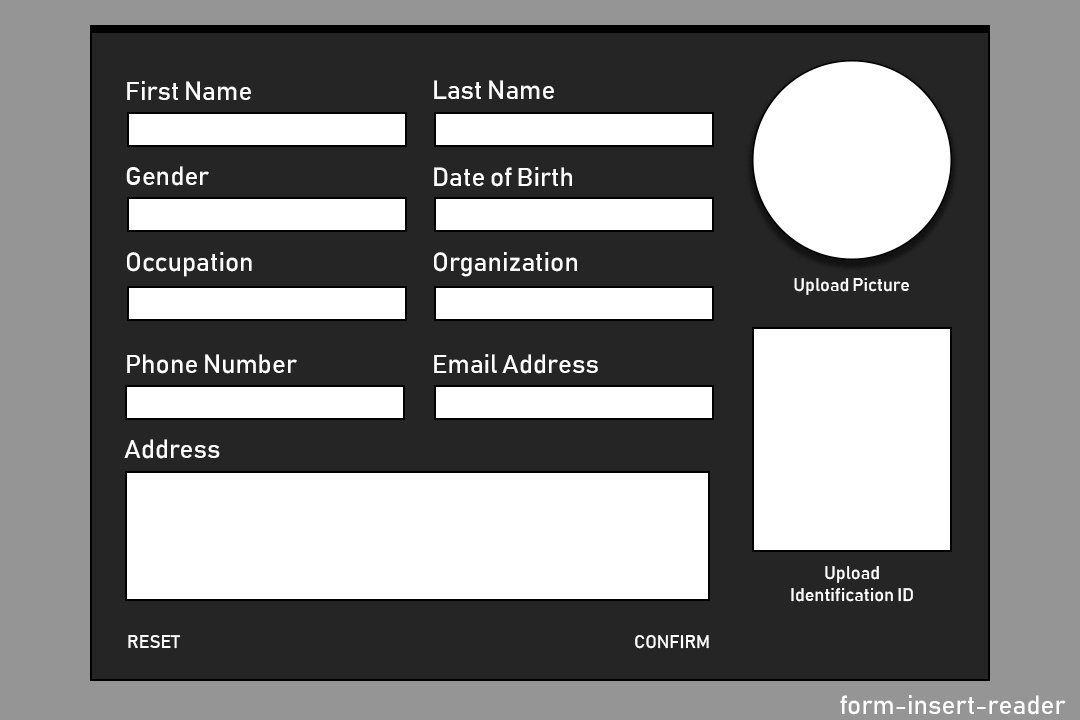
<style>
.page{position:relative;width:1080px;height:720px;background:#252525}
.page>*{position:absolute;margin:0}
.t1{font:26px "Bahnschrift";color:#ffffff}
.t2{font:18px "Bahnschrift";color:#ffffff}
.t3{font:26px "Bahnschrift";color:#fefefe}
</style>
<div class="page">
<p class="t1" style="left:127px;top:81px;width:124px;height:19px">First Name</p>
<p class="t1" style="left:434px;top:80px;width:120px;height:19px">Last Name</p>
<p class="t1" style="left:126px;top:166px;width:83px;height:20px">Gender</p>
<p class="t1" style="left:434px;top:167px;width:138px;height:20px">Date of Birth</p>
<p class="t1" style="left:127px;top:252px;width:125px;height:25px">Occupation</p>
<p class="t1" style="left:434px;top:252px;width:143px;height:25px">Organization</p>
<p class="t2" style="left:794px;top:278px;width:115px;height:17px">Upload Picture</p>
<p class="t1" style="left:127px;top:354px;width:170px;height:20px">Phone Number</p>
<p class="t1" style="left:434px;top:354px;width:164px;height:20px">Email Address</p>
<p class="t1" style="left:124px;top:439px;width:96px;height:20px">Address</p>
<p class="t2" style="left:791px;top:566px;width:122px;height:36px;text-align:center">Upload<br>Identification ID</p>
<p class="t2" style="left:128px;top:635px;width:53px;height:14px">RESET</p>
<p class="t2" style="left:635px;top:635px;width:74px;height:14px">CONFIRM</p>
<p class="t3" style="left:840px;top:695px;width:226px;height:20px">form-insert-reader</p>
</div>
